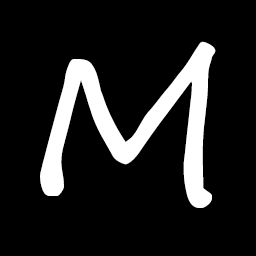
<style>
.page{position:relative;width:256px;height:256px;background:#000000}
.page>*{position:absolute;margin:0}
.t1{font:200px "SegoeScript";color:#ffffff}
</style>
<div class="page">
<p class="t1" style="left:40px;top:41px;width:176px;height:167px">M</p>
</div>
